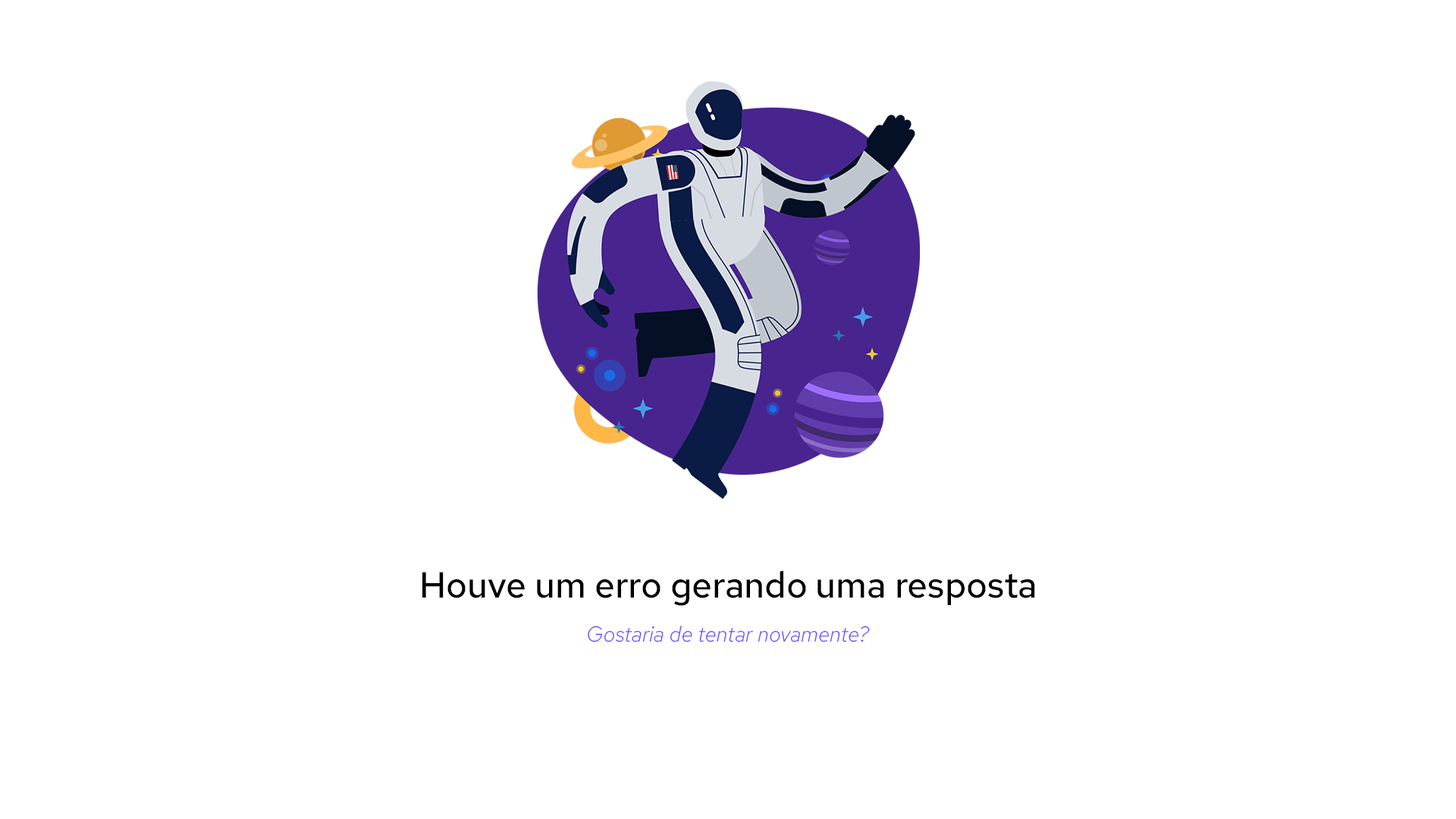
<style>
.page{position:relative;width:1456px;height:819px;background:#ffffff}
.page>*{position:absolute;margin:0}
.t1{font:36.4px "RedHatText-Medium";color:#000000}
.t2{font:21.6px "RedHatTextItalic-LightItalic";color:#6845ff}
</style>
<div class="page">
<p class="t1" style="left:422px;top:570px;width:613px;height:36px">Houve um erro gerando uma resposta</p>
<p class="t2" style="left:588px;top:626px;width:282px;height:16px">Gostaria de tentar novamente?</p>
</div>
